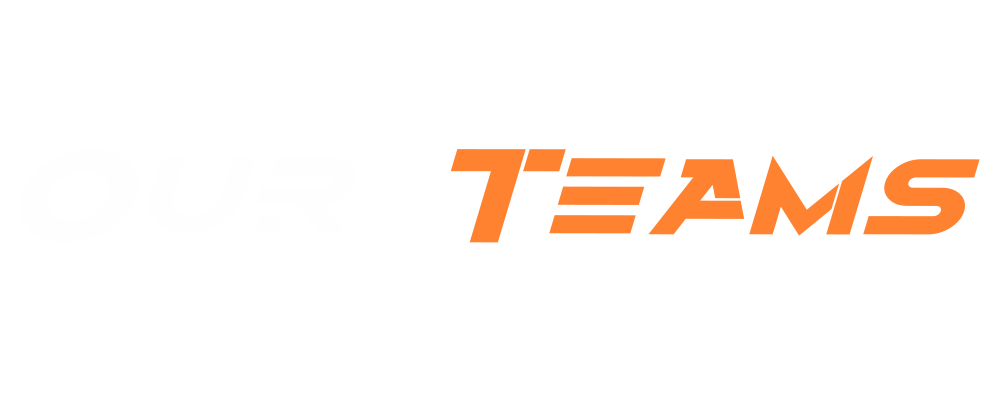
<style>
.page{position:relative;width:1000px;height:400px;background:#ffffff}
.page>*{position:absolute;margin:0}
.t1{font:132.7px "Alternity-BoldItalic";color:#fe8230;scale:1.24 1}
.t2{font:132.7px "Alternity-BoldItalic";color:#fefefe;scale:1.24 1}
</style>
<div class="page">
<p class="t1" style="left:18px;top:149px;width:962px;height:94px"><span class="t2">Our</span> Teams</p>
</div>
